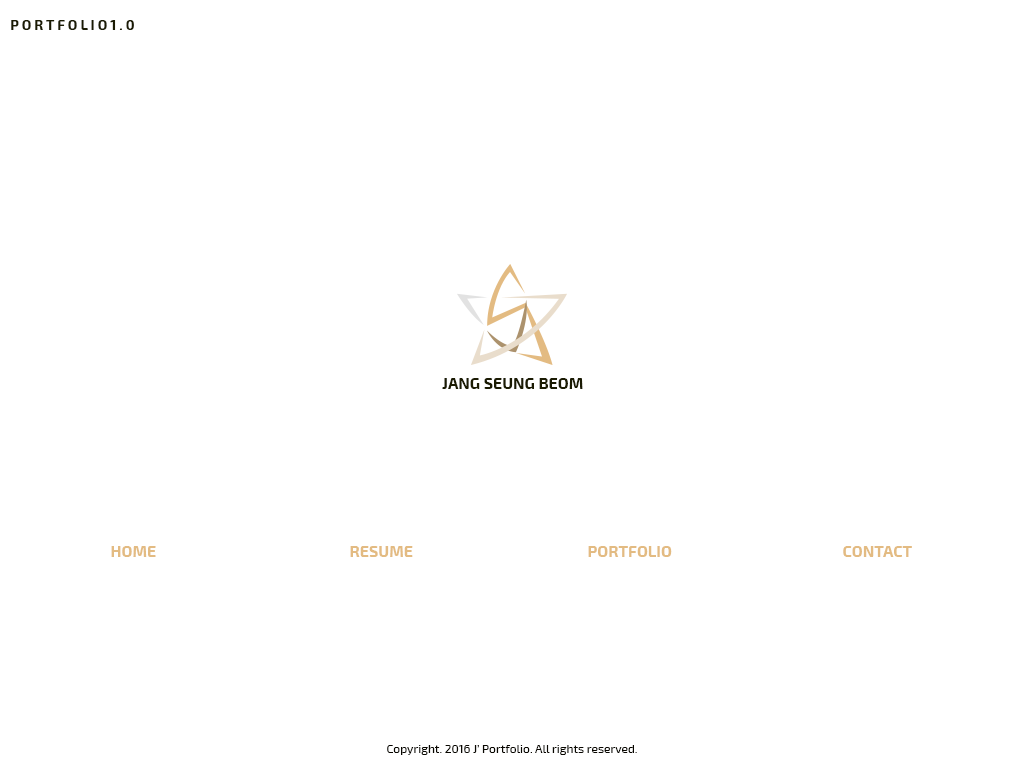
<style>
.page{position:relative;width:1024px;height:768px;background:#ffffff}
.page>*{position:absolute;margin:0}
.t1{font:14px "Exo2-Bold";color:#1b1b03}
.t2{font:16px "Exo2-Bold";color:#1b1b03}
.t3{font:16px "Exo2-Bold";color:#e3bb82}
.t4{font:12px "Exo2-Regular";color:#080600}
</style>
<div class="page">
<p class="t1" style="left:11px;top:20px;width:123px;height:10px">P O R T F O L I O 1 . 0</p>
<p class="t2" style="left:442px;top:378px;width:141px;height:11px">JANG SEUNG BEOM</p>
<p class="t3" style="left:111px;top:546px;width:45px;height:11px">HOME</p>
<p class="t3" style="left:350px;top:546px;width:63px;height:11px">RESUME</p>
<p class="t3" style="left:588px;top:546px;width:84px;height:11px">PORTFOLIO</p>
<p class="t3" style="left:843px;top:546px;width:69px;height:11px">CONTACT</p>
<p class="t4" style="left:387px;top:745px;width:250px;height:10px">Copyright. 2016 J’ Portfolio. All rights reserved.</p>
</div>
